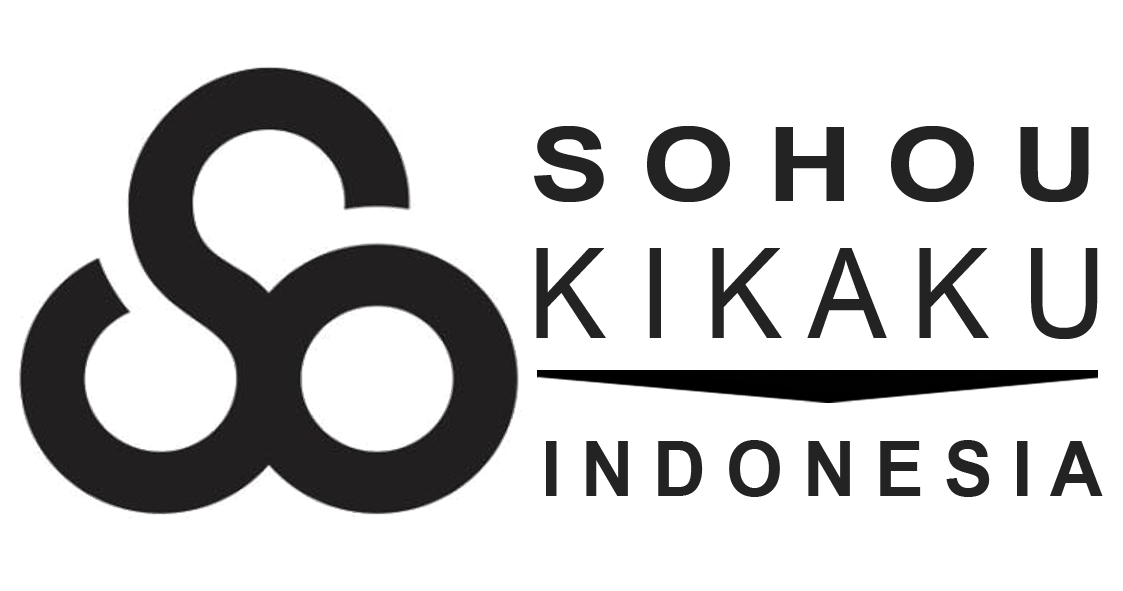
<style>
.page{position:relative;width:1123px;height:591px;background:#ffffff}
.page>*{position:absolute;margin:0}
.t1{font:102.6px "Arial-BoldMT";color:#242323;scale:1.16 1}
.t2{font:126.4px "ArialMT";color:#242323;scale:0.92 1}
.t3{font:75.7px "Arial-BoldMT";color:#242323;scale:0.96 1}
</style>
<div class="page">
<p class="t1" style="left:534px;top:126px;width:555px;height:76px">S O H O U</p>
<p class="t2" style="left:536px;top:248px;width:562px;height:91px">K I K A K U</p>
<p class="t3" style="left:546px;top:440px;width:557px;height:57px">I N D O N E S I A</p>
</div>
